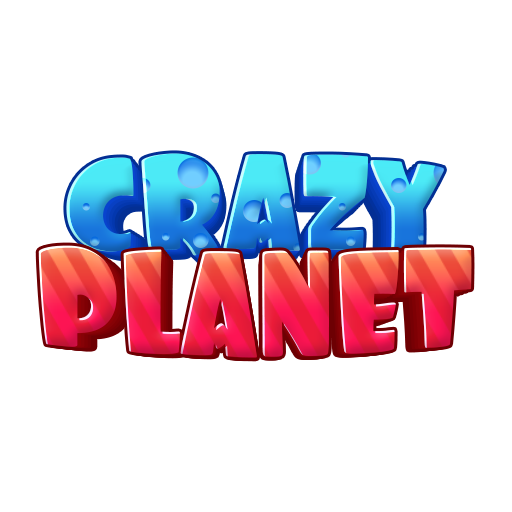
<style>
.page{position:relative;width:512px;height:512px;background:#ffffff}
.page>*{position:absolute;margin:0}
.t1{font:125px "Foo-Regular";letter-spacing:-0.01em}
.t2{font:122.5px "Foo-Regular";letter-spacing:-0.01em}
.t3{font:110.7px "Foo-Regular";letter-spacing:-0.01em}
.t4{font:137.5px "Foo-Regular";letter-spacing:-0.005em;scale:0.91 1}
.t5{font:134.8px "Foo-Regular";letter-spacing:-0.005em;scale:0.91 1}
.t6{font:132.1px "Foo-Regular";letter-spacing:-0.005em;scale:0.91 1}
.t7{font:126.8px "Foo-Regular";letter-spacing:-0.005em;scale:0.91 1}
.t8{font:124.3px "Foo-Regular";letter-spacing:-0.005em;scale:0.91 1}
</style>
<div class="page">
<p class="t1" style="left:66px;top:153px;width:378px;height:103px">CRAZY</p>
<p class="t2" style="left:70px;top:156px;width:371px;height:101px">CRAZY</p>
<p class="t3" style="left:87px;top:171px;width:336px;height:91px">CRAZY</p>
<p class="t4" style="left:38px;top:245px;width:434px;height:113px">PLANET</p>
<p class="t5" style="left:43px;top:248px;width:425px;height:110px">PLANET</p>
<p class="t6" style="left:47px;top:250px;width:416px;height:108px">PLANET</p>
<p class="t7" style="left:55px;top:254px;width:400px;height:105px">PLANET</p>
<p class="t8" style="left:59px;top:257px;width:392px;height:102px">PLANET</p>
</div>
